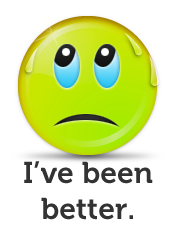
<style>
.page{position:relative;width:174px;height:230px;background:#ffffff}
.page>*{position:absolute;margin:0}
.t1{font:30px "Museo-700";color:#333333}
</style>
<div class="page">
<p class="t1" style="left:24px;top:161px;width:129px;height:59px;text-align:center">I’ve been<br>better.</p>
</div>
